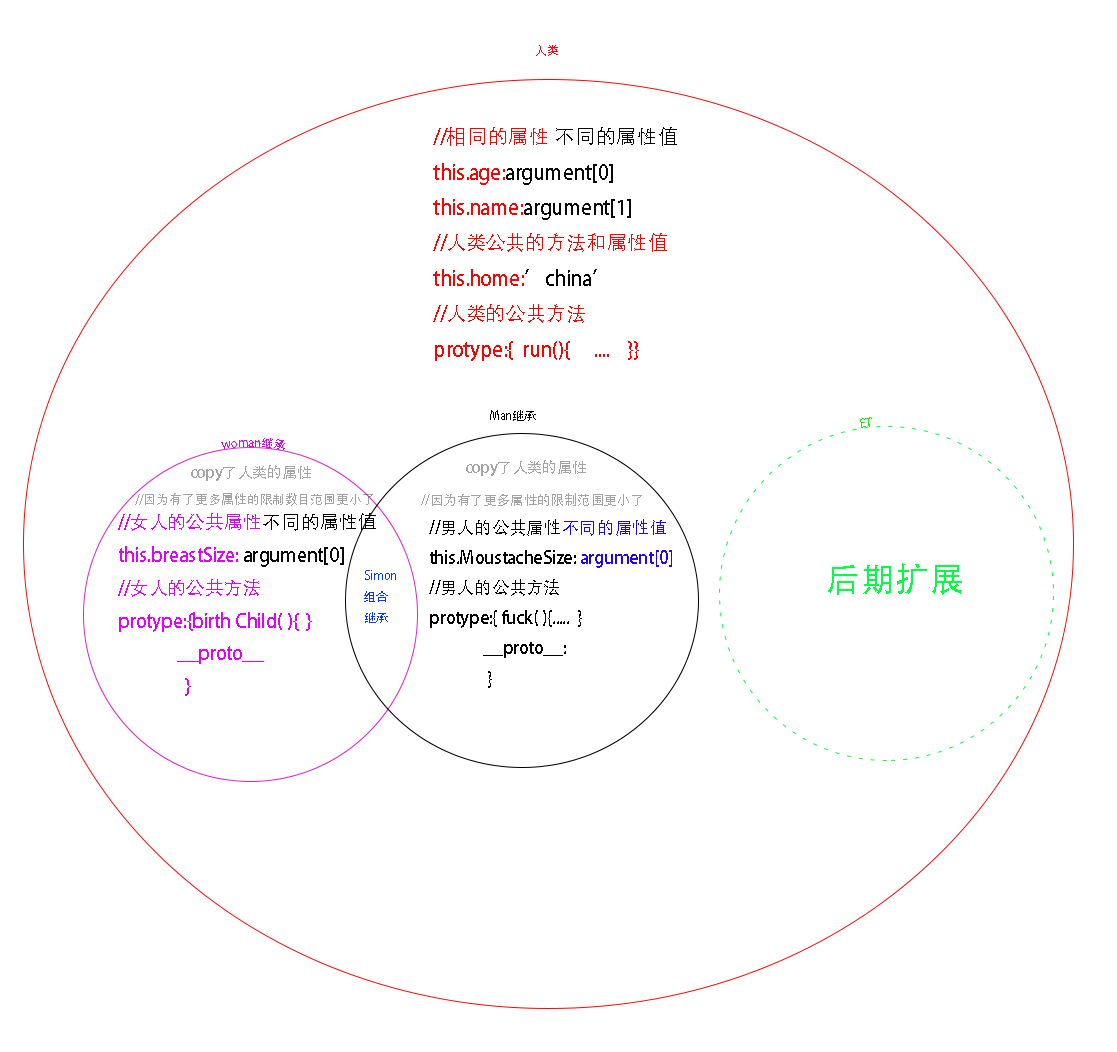
<style>
.page{position:relative;width:1117px;height:1052px;background:#ffffff}
.page>*{position:absolute;margin:0}
.t1{font:12px "AdobeHeitiStd-Regular";color:#fd020e}
.t2{font:20.2px "AdobeHeitiStd-Regular";color:#fd0000}
.t3{font:20.2px "AdobeHeitiStd-Regular";color:#090909}
.t4{font:20.2px "AdobeHeitiStd-Regular";color:#030303}
.t5{font:12px "AdobeHeitiStd-Regular";color:#000000}
.t6{font:12px "AdobeHeitiStd-Regular";color:#15f204}
.t7{font:12px "AdobeHeitiStd-Regular";color:#e200fd}
.t8{font:15.2px "AdobeHeitiStd-Regular";color:#a3a3a3}
.t9{font:12.8px "AdobeHeitiStd-Regular";color:#a3a3a3}
.t10{font:13.3px "AdobeHeitiStd-Regular";color:#a3a3a3}
.t11{font:18.8px "AdobeHeitiStd-Regular";color:#e200fd}
.t12{font:18.8px "AdobeHeitiStd-Regular";color:#050505}
.t13{font:18.8px "AdobeHeitiStd-Regular";color:#090909}
.t14{font:17.3px "AdobeHeitiStd-Regular";color:#000000}
.t15{font:17.3px "AdobeHeitiStd-Regular";color:#1c05f9}
.t16{font:17.3px "AdobeHeitiStd-Regular";color:#2103fe}
.t17{font:33.8px "AdobeHeitiStd-Regular";color:#02fd43}
.t18{font:12px "AdobeHeitiStd-Regular";color:#0639f7}
</style>
<div class="page">
<p class="t1" style="left:536px;top:45px;width:22px;height:11px">人类</p>
<p class="t2" style="left:433px;top:127px;width:244px;height:234px">//相同的属性 <span class="t3">不同的属性值<br></span>this.age:<span class="t3">argument[0]  <br></span>this.name:<span class="t3">argument[1]<br></span>//人类公共的方法和属性值<br>this.home:<span class="t4">’china’<br></span>//人类的公共方法 <br>protype:{  run(){     ....    }}</p>
<p class="t5" style="left:490px;top:410px;width:46px;height:11px">Man继承</p>
<p class="t6" style="left:860px;top:417px;width:12px;height:11px">ET</p>
<p class="t7" style="left:221px;top:438px;width:64px;height:12px">woman继承</p>
<p class="t8" style="left:466px;top:460px;width:120px;height:16px">copy了人类的属性</p>
<p class="t8" style="left:191px;top:465px;width:120px;height:16px">copy了人类的属性</p>
<p class="t9" style="left:135px;top:493px;width:238px;height:13px">//因为有了更多属性的限制数目范围更小了</p>
<p class="t10" style="left:421px;top:493px;width:221px;height:13px">//因为有了更多属性的限制范围更小了</p>
<p class="t11" style="left:118px;top:513px;width:258px;height:183px">//女人的公共属性<span class="t12">不同的属性值<br></span>this.breastSize:<span class="t13"> argument[0]<br></span>//女人的公共方法<br>protype:{birth Child( ){  }<br>              __proto__<br>                }</p>
<p class="t14" style="left:429px;top:519px;width:243px;height:169px">//男人的公共属性<span class="t15">不同的属性值<br></span>this.MoustacheSize: <span class="t16">argument[0]<br></span>//男人的公共方法<br>protype:{ fuck( ){.....  }<br>              __proto__:<br>               }</p>
<p class="t17" style="left:828px;top:563px;width:134px;height:32px">后期扩展</p>
<p class="t18" style="left:364px;top:570px;width:32px;height:53px">Simon<br>组合<br>继承</p>
</div>
